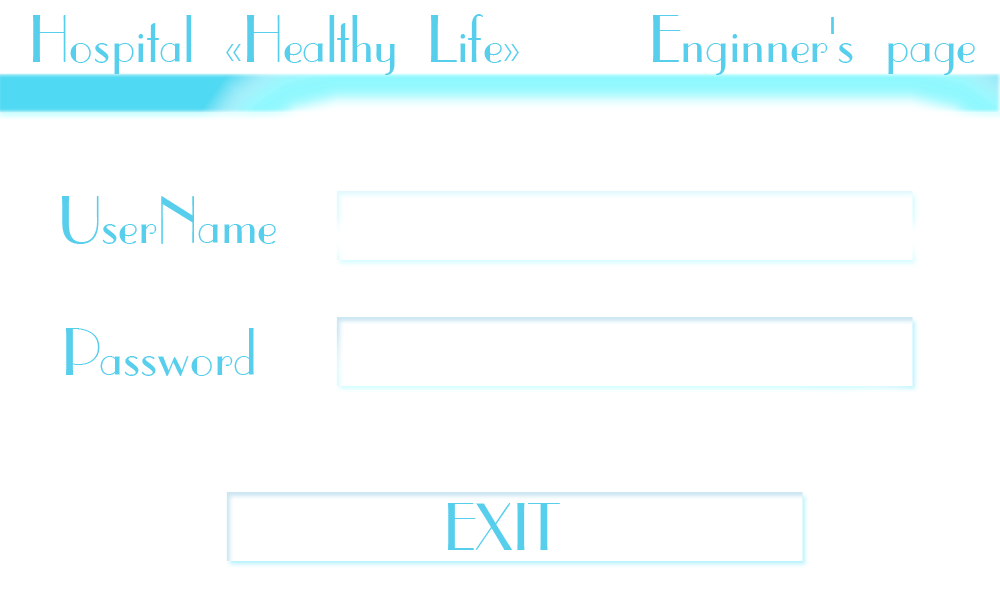
<style>
.page{position:relative;width:1000px;height:600px;background:#ffffff}
.page>*{position:absolute;margin:0}
.t1{font:63.5px "CafeParisC";color:#56ceec}
</style>
<div class="page">
<p class="t1" style="left:33px;top:14px;width:486px;height:61px">Hospital «Healthy Life»</p>
<p class="t1" style="left:653px;top:15px;width:322px;height:60px">Enginner's page</p>
<p class="t1" style="left:62px;top:196px;width:214px;height:48px">UserName</p>
<p class="t1" style="left:66px;top:328px;width:188px;height:48px">Password</p>
<p class="t1" style="left:448px;top:503px;width:112px;height:47px">EXIT</p>
</div>
